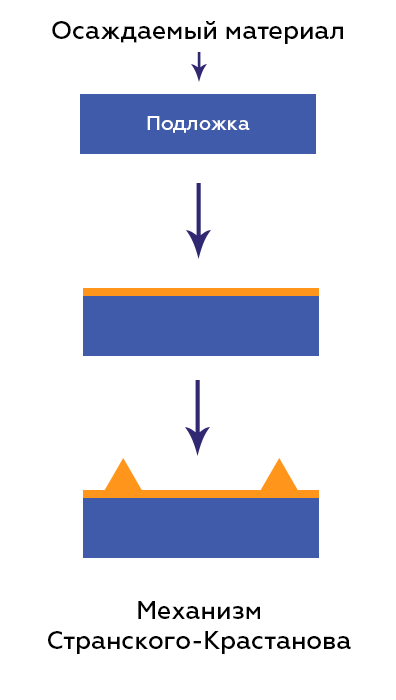
<style>
.page{position:relative;width:396px;height:700px;background:#ffffff}
.page>*{position:absolute;margin:0}
.t1{font:25px "Geometria-Medium";color:#000000}
.t2{font:20px "Geometria-Medium";color:#ffffff}
</style>
<div class="page">
<p class="t1" style="left:52px;top:21px;width:291px;height:23px">Осаждаемый материал</p>
<p class="t2" style="left:147px;top:116px;width:103px;height:17px">Подложка</p>
<p class="t1" style="left:48px;top:601px;width:303px;height:53px;text-align:center">Механизм<br>Странского-Крастанова</p>
</div>
